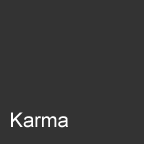
<style>
.page{position:relative;width:144px;height:144px;background:#333333}
.page>*{position:absolute;margin:0}
.t1{font:20px "ArialMT";color:#ffffff}
</style>
<div class="page">
<p class="t1" style="left:11px;top:112px;width:57px;height:16px">Karma</p>
</div>
